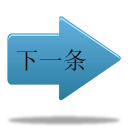
<style>
.page{position:relative;width:128px;height:128px;background:#ffffff}
.page>*{position:absolute;margin:0}
.t1{font:24px "SimSun";color:#0d0804}
</style>
<div class="page">
<p class="t1" style="left:16px;top:49px;width:70px;height:22px">下一条</p>
</div>
